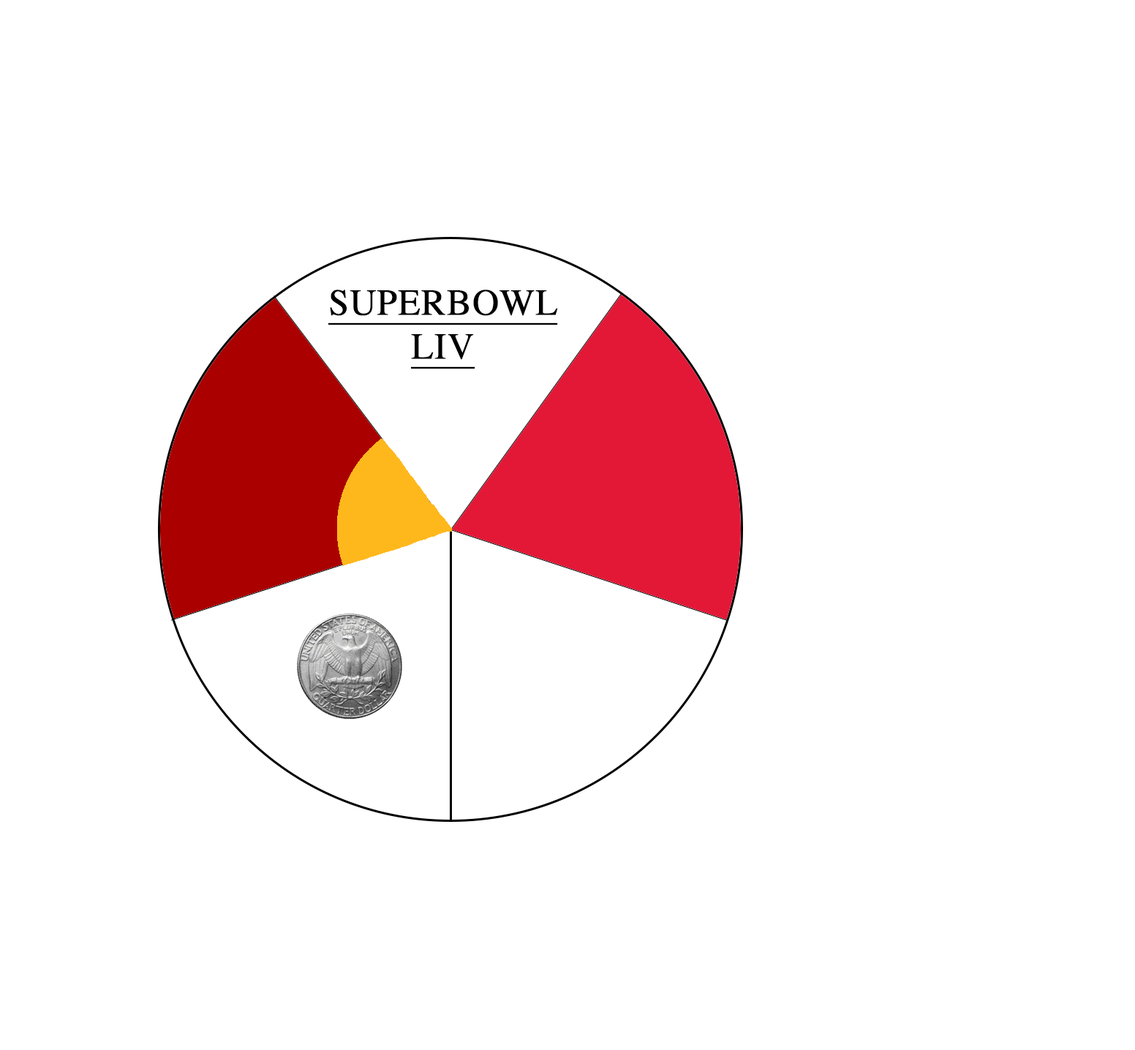
<style>
.page{position:relative;width:1135px;height:1050px;background:#ffffff}
.page>*{position:absolute;margin:0}
.t1{font:36.6px "Times-Roman";color:#000000;font-weight:bold;text-decoration:underline}
</style>
<div class="page">
<p class="t1" style="left:328px;top:290px;width:230px;height:79px;text-align:center">SUPERBOWL<br>LIV</p>
</div>
